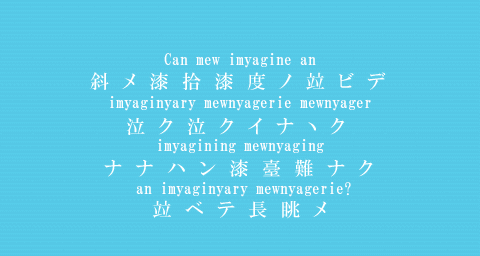
<style>
.page{position:relative;width:480px;height:256px;background:#55c8e6}
.page>*{position:absolute;margin:0}
.t1{font:16px/43px "HGMinchoB";color:#ffffff}
</style>
<div class="page">
<p class="t1" style="left:110px;top:53px;width:261px;height:144px;text-align:center">Can mew imyagine an <br>imyaginyary mewnyagerie mewnyager <br>imyagining mewnyaging <br>an imyaginyary mewnyagerie?</p>
</div>
